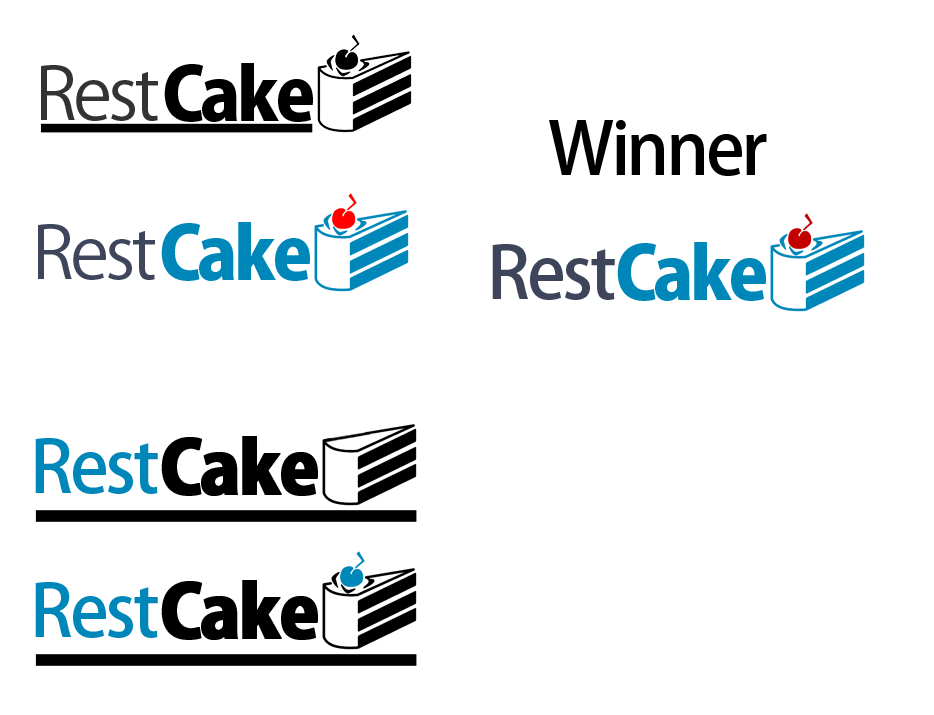
<style>
.page{position:relative;width:934px;height:715px;background:#ffffff}
.page>*{position:absolute;margin:0}
.t1{font:72px "KozGoPro-Regular";letter-spacing:-0.05em;color:#333333}
.t2{font:72px "KozGoPro-Heavy";letter-spacing:-0.05em;color:#000000}
.t3{font:72px "KozGoPro-Medium";letter-spacing:-0.05em;color:#000000}
.t4{font:72px "KozGoPro-Heavy";letter-spacing:-0.05em;color:#0087b9}
.t5{font:72px "KozGoPro-Regular";letter-spacing:-0.05em;color:#3e455b}
.t6{font:72px "KozGoPro-Medium";letter-spacing:-0.05em;color:#3e455b}
.t7{font:72px "KozGoPro-Medium";letter-spacing:-0.05em;color:#0087b9}
.t8{font:72px "KozGoPro-Heavy";letter-spacing:-0.05em;color:#000000;font-weight:bold}
</style>
<div class="page">
<p class="t1" style="left:41px;top:65px;width:117px;height:56px">Rest</p>
<p class="t2" style="left:164px;top:63px;width:149px;height:59px">Cake</p>
<p class="t3" style="left:549px;top:120px;width:218px;height:56px">Winner</p>
<p class="t4" style="left:161px;top:222px;width:149px;height:59px">Cake</p>
<p class="t5" style="left:38px;top:224px;width:117px;height:56px">Rest</p>
<p class="t6" style="left:492px;top:244px;width:123px;height:56px">Rest</p>
<p class="t4" style="left:617px;top:242px;width:149px;height:59px">Cake</p>
<p class="t7" style="left:35px;top:438px;width:123px;height:56px">Rest</p>
<p class="t8" style="left:161px;top:436px;width:157px;height:60px">Cake</p>
<p class="t7" style="left:35px;top:582px;width:123px;height:56px">Rest</p>
<p class="t8" style="left:161px;top:580px;width:157px;height:60px">Cake</p>
</div>
